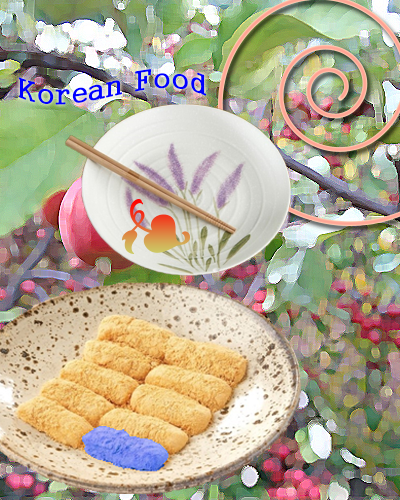
<style>
.page{position:relative;width:400px;height:500px}
.page>*{position:absolute;margin:0}
.t1{font:28px "Gungsuh";color:#0000ff}
</style>
<div class="page">
<p class="t1" style="left:18px;top:69px;width:189px;height:36px">Korean  Food</p>
</div>
